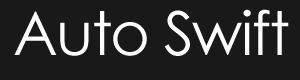
<style>
.page{position:relative;width:300px;height:80px;background:#191919}
.page>*{position:absolute;margin:0}
.t1{font:60.4px "CenturyGothic";letter-spacing:-0.025em;color:#ffffff}
</style>
<div class="page">
<p class="t1" style="left:14px;top:9px;width:275px;height:47px">Auto Swift</p>
</div>
